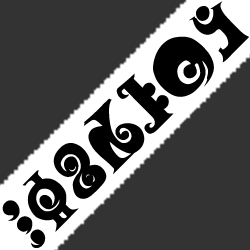
<style>
.page{position:relative;width:250px;height:250px;background:#333333}
.page>*{position:absolute;margin:0}
.t1{font:79.9px "MadokaRunes-2.0";color:#000000}
</style>
<div class="page">
<p class="t1" style="left:2px;top:1px;width:247px;height:247px;rotate:-45deg">SPOILER</p>
</div>
